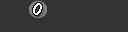
<style>
.page{position:relative;width:128px;height:32px;background:#333333}
.page>*{position:absolute;margin:0}
.t1{font:18px "DomDiagonalBT-Regular";letter-spacing:0.075em;color:#ffffff}
</style>
<div class="page">
<p class="t1" style="left:33px;top:3px;width:9px;height:12px">O</p>
</div>
